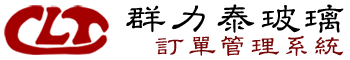
<style>
.page{position:relative;width:350px;height:60px;background:#ffffff}
.page>*{position:absolute;margin:0}
.t1{font:43.4px "DFKuoTaiBeiStd-W4";letter-spacing:0.025em;color:#000000}
.t2{font:31px "DFKuoTaiBeiStd-W4";letter-spacing:0.025em;color:#770707}
</style>
<div class="page">
<p class="t1" style="left:126px;top:4px;width:218px;height:29px">群力泰玻璃</p>
<p class="t2" style="left:155px;top:35px;width:189px;height:21px">訂單管理系統</p>
</div>
